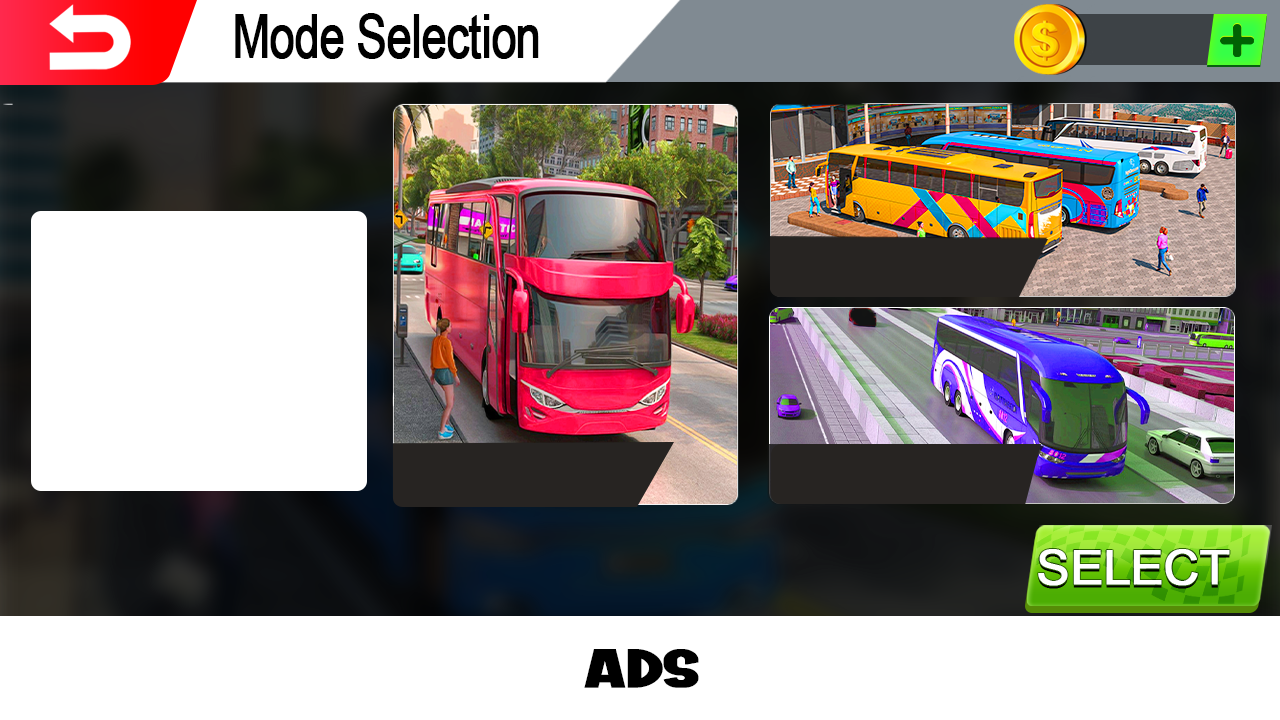
<style>
.page{position:relative;width:1280px;height:720px;background:#ffffff}
.page>*{position:absolute;margin:0}
.t1{font:59.7px "ArialMT";letter-spacing:-0.025em;color:#000000;font-weight:bold;scale:0.75 1}
.t2{font:46.6px "ArialMT";letter-spacing:-0.025em;color:#ffffff;font-weight:bold;scale:1.06 1}
.t3{font:54.4px "ROYALMOSCOWRegular";letter-spacing:-0.025em;color:#000000;font-weight:bold;scale:1.45 1}
</style>
<div class="page">
<p class="t1" style="left:235px;top:13px;width:304px;height:46px">Mode Selection</p>
<p class="t2" style="left:1038px;top:549px;width:192px;height:37px">SELECT</p>
<p class="t3" style="left:584px;top:649px;width:115px;height:39px">ADS</p>
</div>
